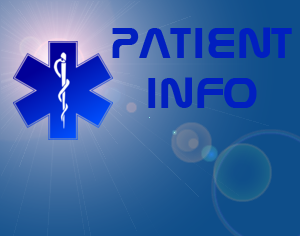
<style>
.page{position:relative;width:300px;height:236px}
.page>*{position:absolute;margin:0}
.t1{font:45.8px/50px "Nasalization";letter-spacing:0.06em;color:#011fc0}
.t2{font:45.8px/50px "Nasalization";color:#011fc0}
</style>
<div class="page">
<p class="t1" style="left:112px;top:27px;width:180px;height:81px;text-align:center"><span class="t2">Pa</span>tie<span class="t2">nt<br></span>in<span class="t2">fo</span></p>
</div>
